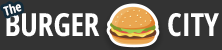
<style>
.page{position:relative;width:222px;height:50px;background:#333333}
.page>*{position:absolute;margin:0}
.t1{font:12.7px "OpenSans-CondensedBold";letter-spacing:-0.01em;color:#ffffff}
.t2{font:31.8px "OpenSans-CondensedBold";letter-spacing:-0.01em;color:#ffffff}
</style>
<div class="page">
<p class="t1" style="left:3px;top:4px;width:19px;height:12px;rotate:-15deg">The</p>
<p class="t2" style="left:6px;top:13px;width:94px;height:24px">BURGER</p>
<p class="t2" style="left:168px;top:13px;width:51px;height:24px">CITY</p>
</div>
